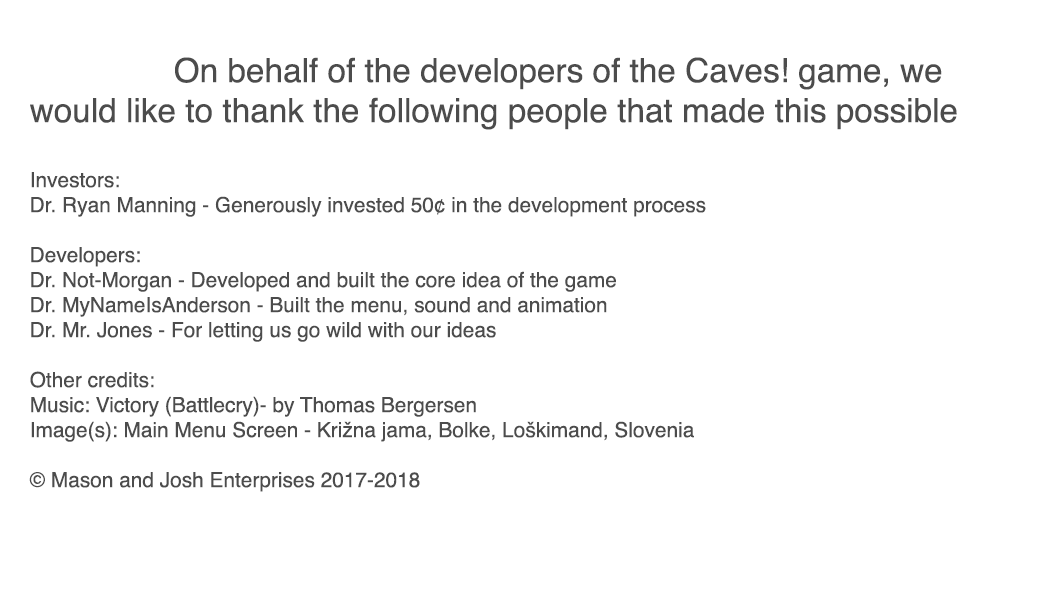
<style>
.page{position:relative;width:1062px;height:612px;background:#ffffff}
.page>*{position:absolute;margin:0}
.t1{font:20.8px "Helvetica";color:#4c4c4c}
.t2{font:33.3px "Helvetica";color:#4c4c4c}
</style>
<div class="page">
<p class="t1" style="left:29px;top:57px;width:928px;height:435px"><span class="t2">    On behalf of the developers of the Caves! game, we <br>would like to thank the following people that made this possible<br><br></span>Investors:<br>Dr. Ryan Manning - Generously invested 50¢ in the development process<br><br>Developers:<br>Dr. Not-Morgan - Developed and built the core idea of the game<br>Dr. MyNameIsAnderson - Built the menu, sound and animation<br>Dr. Mr. Jones - For letting us go wild with our ideas<br><br>Other credits:<br>Music: Victory (Battlecry)- by Thomas Bergersen<br>Image(s): Main Menu Screen - Križna jama, Bolke, Loškimand, Slovenia<br><br>© Mason and Josh Enterprises 2017-2018</p>
</div>
